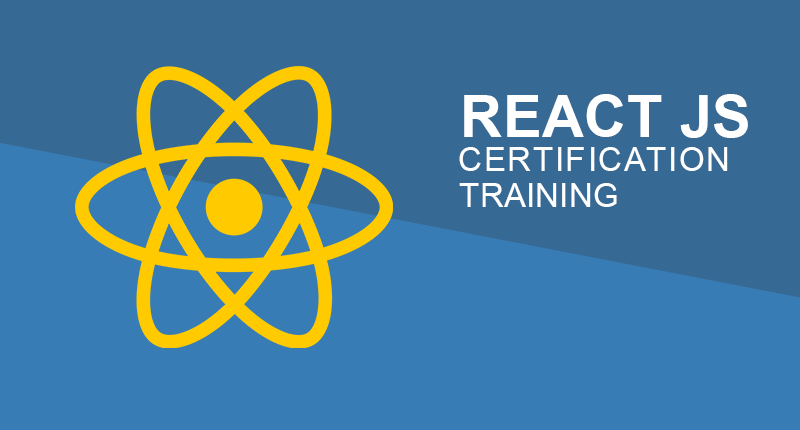
<style>
.page{position:relative;width:800px;height:430px;background:#366994}
.page>*{position:absolute;margin:0}
.t1{font:57.9px "Arial-BoldMT";letter-spacing:0.01em;color:#ffffff}
.t2{font:33.3px "ArialMT";letter-spacing:0.05em;color:#ffffff}
.t3{font:33.3px "ArialMT";color:#ffffff}
</style>
<div class="page">
<p class="t1" style="left:464px;top:94px;width:284px;height:44px">REACT JS</p>
<p class="t2" style="left:459px;top:147px;width:269px;height:24px">CERTIFICATION</p>
<p class="t3" style="left:459px;top:183px;width:158px;height:24px">TRAINING</p>
</div>
